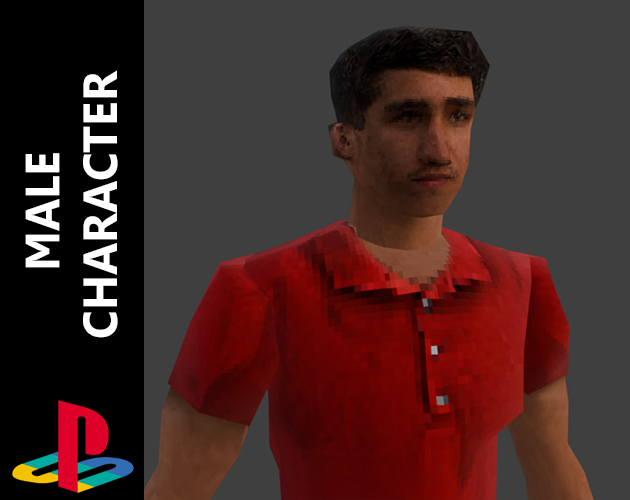
<style>
.page{position:relative;width:630px;height:500px;background:#3f3f3f}
.page>*{position:absolute;margin:0}
.t1{font:48px "Leelawadee-Bold";color:#ffffff;text-transform:uppercase;scale:0.96 1}
</style>
<div class="page">
<p class="t1" style="left:25px;top:70px;width:93px;height:268px;text-align:center;rotate:-90deg">Male <br>Character</p>
</div>
